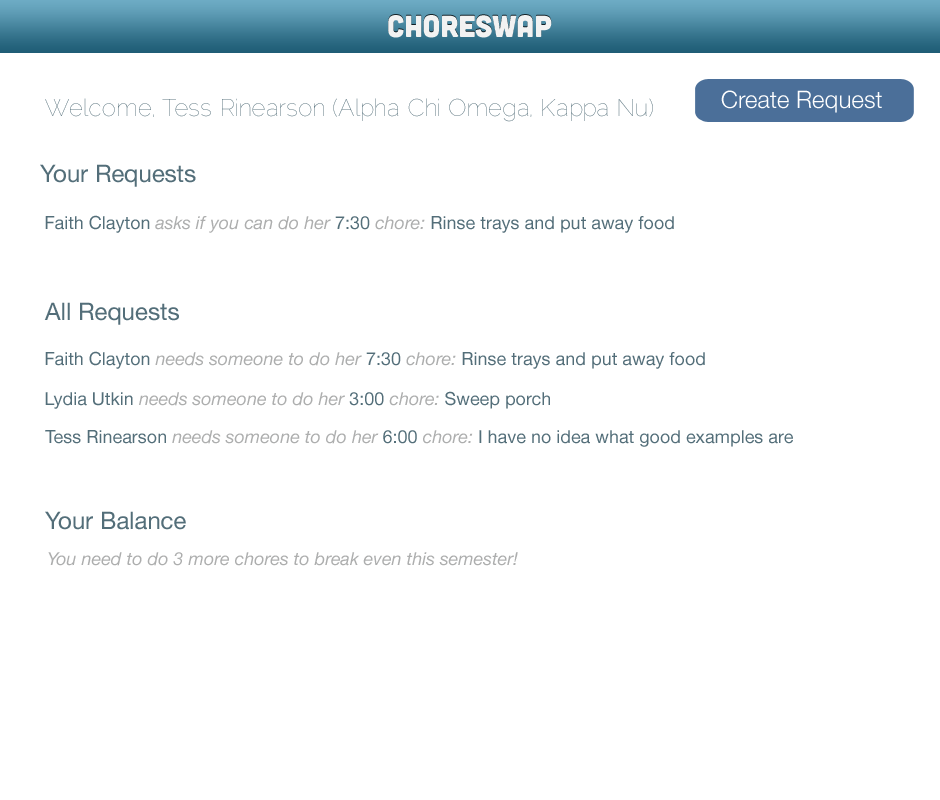
<style>
.page{position:relative;width:940px;height:800px;background:#ffffff}
.page>*{position:absolute;margin:0}
.t1{font:30.5px "Cubano-Regular";color:#f2f2f2}
.t2{font:24px "Raleway-Thin"}
.t3{font:24px "HelveticaNeue-Light";color:#ffffff}
.t4{font:24px "HelveticaNeue";color:#536e79}
.t5{font:18px "HelveticaNeue";color:#536e79}
.t6{font:18px "HelveticaNeue-Italic";color:#adaeae}
</style>
<div class="page">
<p class="t1" style="left:388px;top:15px;width:164px;height:23px">choreswap</p>
<p class="t2" style="left:45px;top:98px;width:608px;height:24px">Welcome, Tess Rinearson (Alpha Chi Omega, Kappa Nu)</p>
<p class="t3" style="left:721px;top:90px;width:161px;height:23px">Create Request</p>
<p class="t4" style="left:40px;top:164px;width:156px;height:23px">Your Requests</p>
<p class="t5" style="left:45px;top:215px;width:629px;height:18px">Faith Clayton <span class="t6">asks if you can do her</span> 7:30 <span class="t6">chore:</span> Rinse trays and put away food</p>
<p class="t4" style="left:44px;top:302px;width:135px;height:23px">All Requests</p>
<p class="t5" style="left:45px;top:351px;width:660px;height:18px">Faith Clayton <span class="t6">needs someone to do her</span> 7:30 <span class="t6">chore:</span> Rinse trays and put away food</p>
<p class="t6" style="left:45px;top:391px;width:505px;height:18px"><span class="t5">Lydia Utkin </span>needs someone to do her<span class="t5"> 3:00 </span>chore:<span class="t5"> Sweep porch</span></p>
<p class="t5" style="left:45px;top:430px;width:748px;height:17px">Tess Rinearson <span class="t6">needs someone to do her</span> 6:00 <span class="t6">chore:</span> I have no idea what good examples are</p>
<p class="t4" style="left:45px;top:511px;width:141px;height:19px">Your Balance</p>
<p class="t6" style="left:48px;top:552px;width:470px;height:14px">You need to do 3 more chores to break even this semester!</p>
</div>
